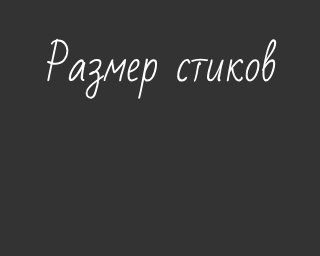
<style>
.page{position:relative;width:320px;height:256px;background:#333333}
.page>*{position:absolute;margin:0}
.t1{font:43px "BadScript-Regular";color:#ffffff}
</style>
<div class="page">
<p class="t1" style="left:47px;top:38px;width:230px;height:61px">Размер стиков</p>
</div>
